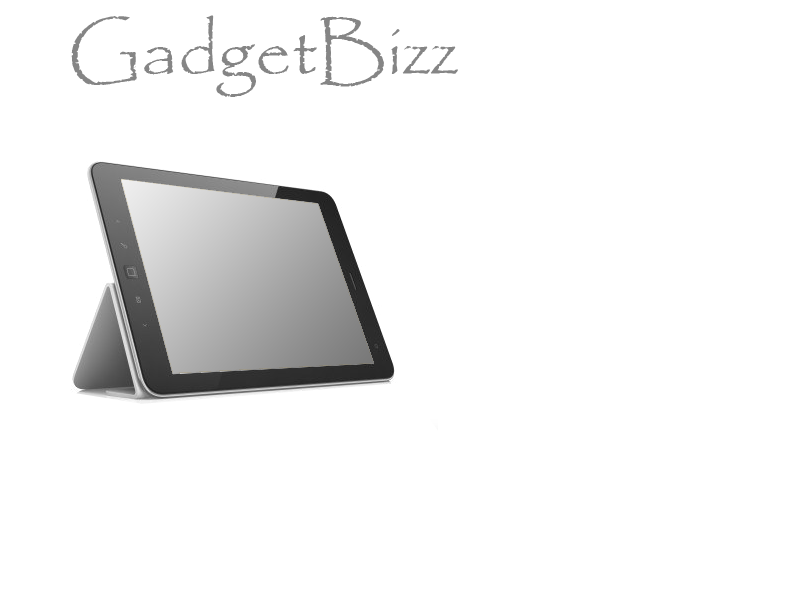
<style>
.page{position:relative;width:800px;height:600px;background:#ffffff}
.page>*{position:absolute;margin:0}
.t1{font:72px "Papyrus-Regular";color:#858585}
</style>
<div class="page">
<p class="t1" style="left:71px;top:15px;width:387px;height:82px">GadgetBizz</p>
</div>
